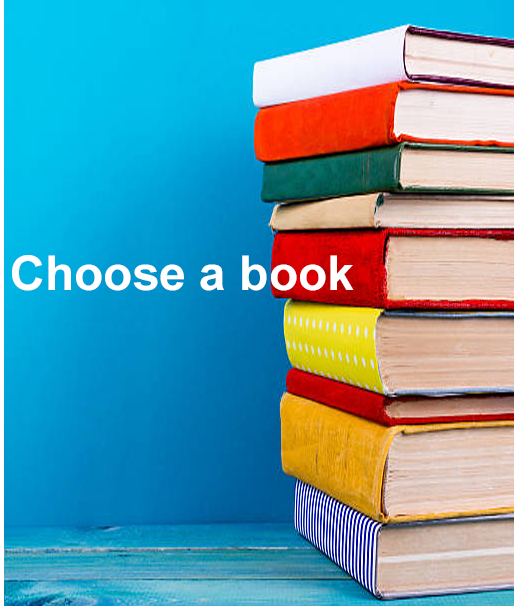
<style>
.page{position:relative;width:518px;height:606px}
.page>*{position:absolute;margin:0}
.t1{font:48px "Arial-BoldMT";color:#ffffff}
</style>
<div class="page">
<p class="t1" style="left:12px;top:255px;width:342px;height:36px">Choose a book</p>
</div>
